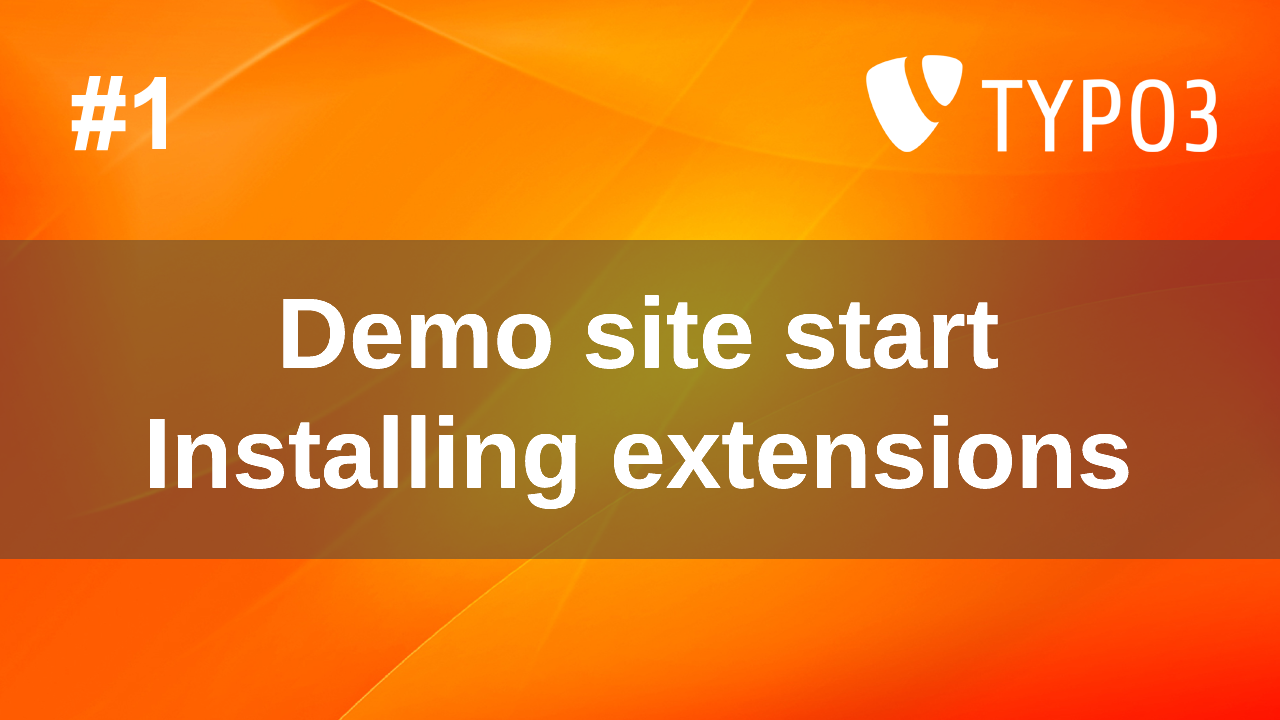
<style>
.page{position:relative;width:1280px;height:720px}
.page>*{position:absolute;margin:0}
.t1{font:100px "Arial-BoldMT";color:#ffffff}
</style>
<div class="page">
<p class="t1" style="left:71px;top:76px;width:95px;height:75px">#1</p>
<p class="t1" style="left:150px;top:295px;width:979px;height:214px;text-align:center">Demo site start<br>Installing extensions</p>
</div>
